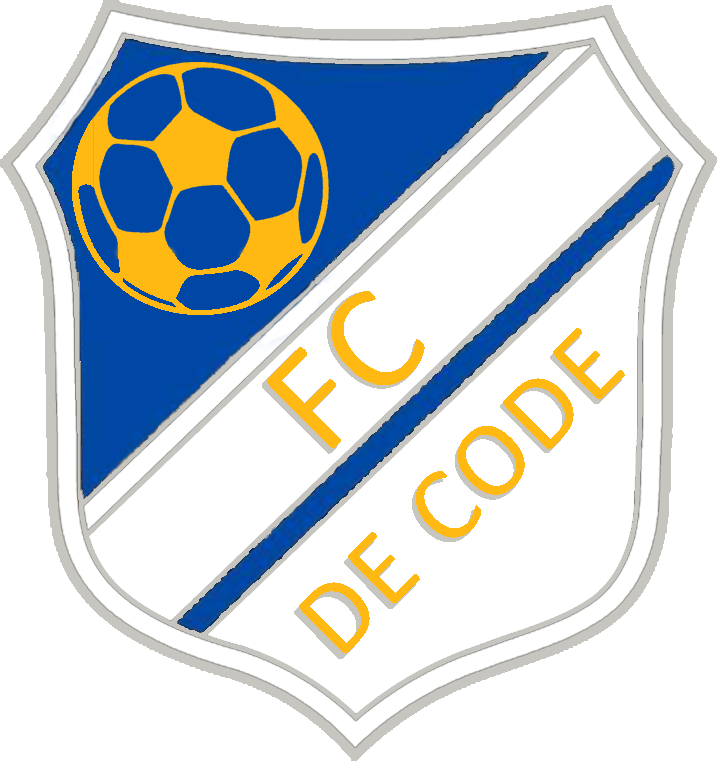
<style>
.page{position:relative;width:717px;height:761px;background:#ffffff}
.page>*{position:absolute;margin:0}
.t1{font:152px "Calibri";letter-spacing:0.04em;color:#ffb912;text-transform:uppercase}
.t2{font:106.4px "Calibri";letter-spacing:0.04em;color:#ffb912;text-transform:uppercase}
.t3{font:107.2px "Calibri";letter-spacing:0.04em;text-transform:uppercase}
</style>
<div class="page">
<p class="t1" style="left:267px;top:291px;width:158px;height:157px;rotate:-45deg">FC</p>
<p class="t2" style="left:299px;top:328px;width:326px;height:325px;rotate:-45deg">De Code</p>
<p class="t3" style="left:294px;top:332px;width:328px;height:327px;rotate:-45deg">De Code</p>
</div>
